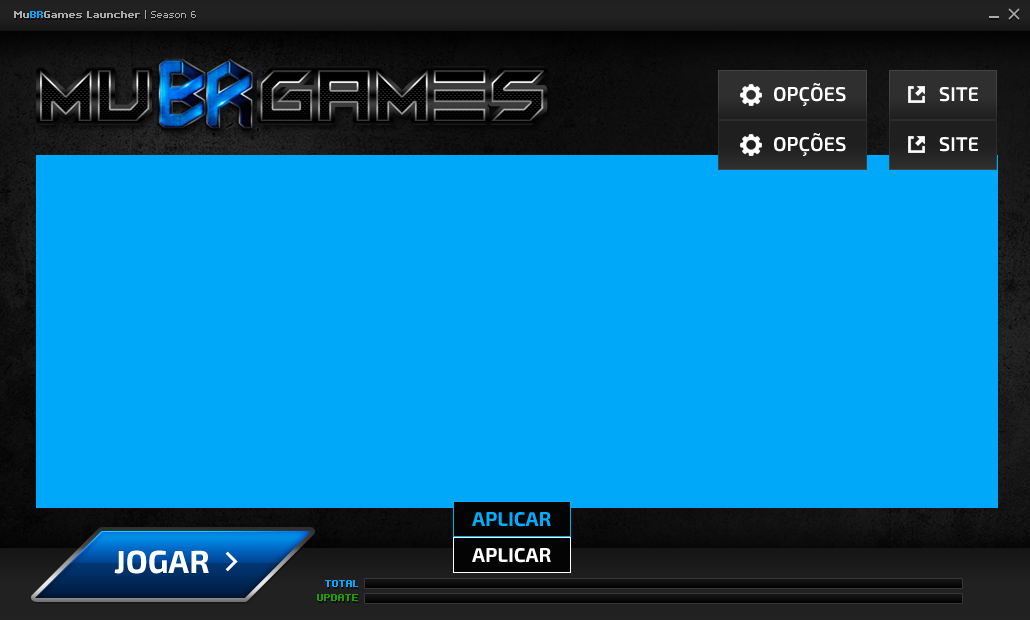
<style>
.page{position:relative;width:1030px;height:620px;background:#00a8fa}
.page>*{position:absolute;margin:0}
.t1{font:8px "PFTempestaSeven-Bold";color:#ababab}
.t2{font:8px "PFTempestaSeven-Bold";color:#00a7fa}
.t3{font:8px "PFTempestaSeven";color:#ababab}
.t4{font:20px "Exo2-SemiBold";color:#ffffff}
.t5{font:20px "Exo2-Bold";color:#00aeff}
.t6{font:32px "Exo2-Bold";color:#ffffff}
.t7{font:32px "Anklada";color:#ffffff}
.t8{font:20px "Exo2-Bold";color:#ffffff}
.t9{font:8px/14px "PFTempestaSeven-Bold";color:#239a08}
.t10{font:8px/14px "PFTempestaSeven-Bold";color:#00a7fa}
</style>
<div class="page">
<p class="t1" style="left:14px;top:10px;width:182px;height:9px">Mu<span class="t2">BR</span>Games Launcher<span class="t3"> | Season 6</span></p>
<p class="t4" style="left:774px;top:83px;width:204px;height:23px">OPÇÕES                     SITE</p>
<p class="t4" style="left:774px;top:133px;width:204px;height:23px">OPÇÕES                     SITE</p>
<p class="t5" style="left:472px;top:512px;width:79px;height:15px">APLICAR</p>
<p class="t6" style="left:114px;top:550px;width:95px;height:24px">JOGAR</p>
<p class="t7" style="left:225px;top:551px;width:13px;height:21px">&gt;</p>
<p class="t8" style="left:472px;top:548px;width:79px;height:15px">APLICAR</p>
<p class="t9" style="left:317px;top:580px;width:41px;height:21px;text-align:right"><span class="t10">TOTAL<br></span>UPDATE</p>
</div>
